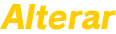
<style>
.page{position:relative;width:116px;height:34px;background:#ffffff}
.page>*{position:absolute;margin:0}
.t1{font:32px "RodinPro-EB";letter-spacing:-0.015em;color:#fecd00;font-style:italic}
</style>
<div class="page">
<p class="t1" style="left:0px;top:4px;width:116px;height:26px">Alterar</p>
</div>
